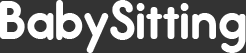
<style>
.page{position:relative;width:246px;height:53px;background:#333333}
.page>*{position:absolute;margin:0}
.t1{font:60px "Report-Bold";color:#ffffff}
</style>
<div class="page">
<p class="t1" style="left:0px;top:0px;width:246px;height:53px">BabySitting</p>
</div>
